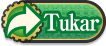
<style>
.page{position:relative;width:106px;height:46px}
.page>*{position:absolute;margin:0}
.t1{font:23px "RyuminPro-ExBold";letter-spacing:-0.08em;color:#ffffff;scale:0.9 1}
</style>
<div class="page">
<p class="t1" style="left:43px;top:13px;width:57px;height:18px">Tukar</p>
</div>
